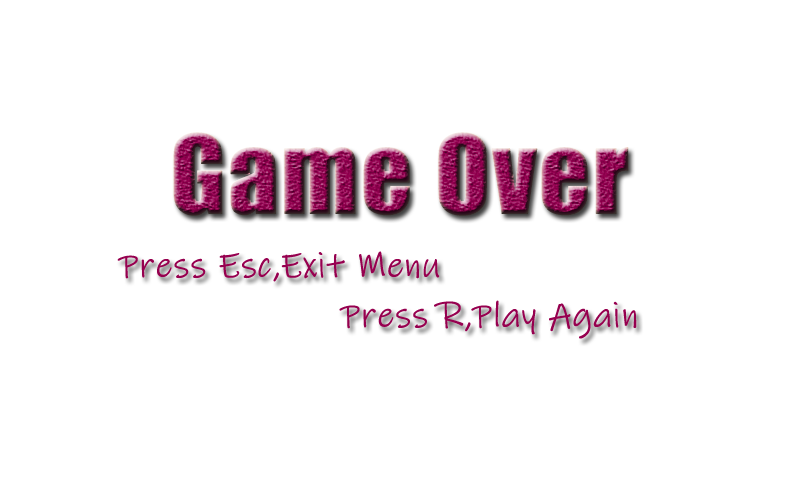
<style>
.page{position:relative;width:800px;height:500px;background:#ffffff}
.page>*{position:absolute;margin:0}
.t1{font:100px "Impact";font-weight:bold}
.t2{font:36px "InkFree";color:#96004f;font-weight:bold}
</style>
<div class="page">
<p class="t1" style="left:173px;top:132px;width:456px;height:84px">Game Over</p>
<p class="t2" style="left:117px;top:251px;width:323px;height:31px">Press Esc,Exit Menu</p>
<p class="t2" style="left:339px;top:300px;width:298px;height:39px">Press R,Play Again</p>
</div>
